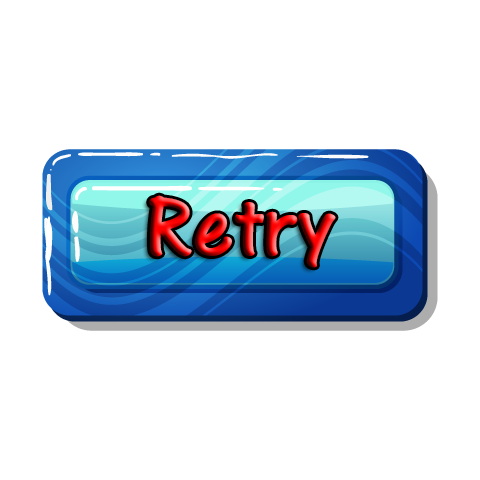
<style>
.page{position:relative;width:480px;height:480px;background:#ffffff}
.page>*{position:absolute;margin:0}
.t1{font:89.7px "OneStrokeScriptLetPlain";scale:1.11 1}
</style>
<div class="page">
<p class="t1" style="left:149px;top:195px;width:187px;height:73px">Retry</p>
</div>
